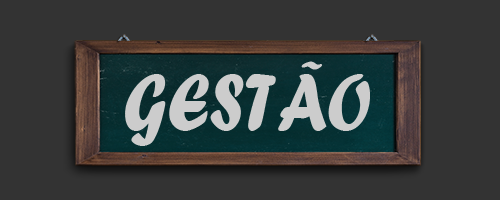
<style>
.page{position:relative;width:500px;height:200px;background:#333333}
.page>*{position:absolute;margin:0}
.t1{font:85.3px "ForteMT";color:#cccccc;scale:0.81 1}
.t2{font:85.3px "SnapITC-Regular";color:#00ff66;scale:0.81 1}
</style>
<div class="page">
<p class="t1" style="left:125px;top:61px;width:245px;height:85px"><span class="t2"> </span>GESTÃO</p>
</div>
